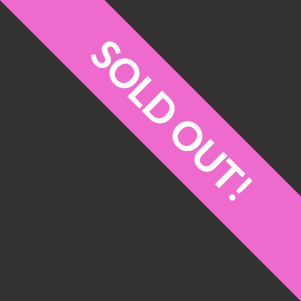
<style>
.page{position:relative;width:301px;height:301px;background:#333333}
.page>*{position:absolute;margin:0}
.t1{font:39.4px "Lato-Bold";color:#ffffff}
</style>
<div class="page">
<p class="t1" style="left:91px;top:41px;width:162px;height:160px;rotate:45deg">SOLD OUT!</p>
</div>
